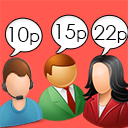
<style>
.page{position:relative;width:128px;height:128px;background:#ff5950}
.page>*{position:absolute;margin:0}
.t1{font:20.8px "CenturyGothic";color:#000000}
.t2{font:15.8px "CenturyGothic";color:#000000}
</style>
<div class="page">
<p class="t1" style="left:9px;top:27px;width:31px;height:18px">10<span class="t2">p</span></p>
<p class="t1" style="left:56px;top:24px;width:31px;height:18px">15<span class="t2">p</span></p>
<p class="t1" style="left:94px;top:25px;width:33px;height:18px">22<span class="t2">p</span></p>
</div>
